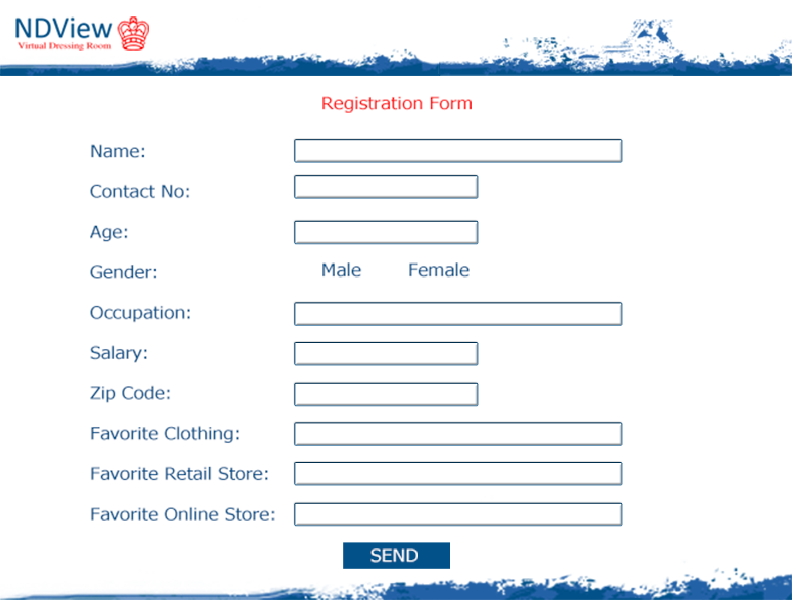
<style>
.page{position:relative;width:792px;height:600px;background:#ffffff}
.page>*{position:absolute;margin:0}
.t1{font:16.8px "Tahoma";color:#ff1717;scale:1.15 1}
.t2{font:16.8px "Tahoma";color:#06538a;scale:1.15 1}
.t3{font:16.8px "Tahoma";color:#04528a;scale:1.15 1}
.t4{font:16.8px "Tahoma";color:#ffffff;scale:1.15 1}
</style>
<div class="page">
<p class="t1" style="left:322px;top:96px;width:150px;height:17px">Registration Form</p>
<p class="t2" style="left:90px;top:144px;width:185px;height:377px">Name:<br><br>Contact No:<br><br>Age:<br><br>Gender:<br><br>Occupation:<br><br>Salary:<br><br>Zip Code:<br><br>Favorite Clothing:<br><br>Favorite Retail Store:<br><br>Favorite Online Store:</p>
<p class="t3" style="left:322px;top:262px;width:148px;height:16px">Male  Female</p>
<p class="t4" style="left:370px;top:548px;width:48px;height:15px">SEND</p>
</div>
